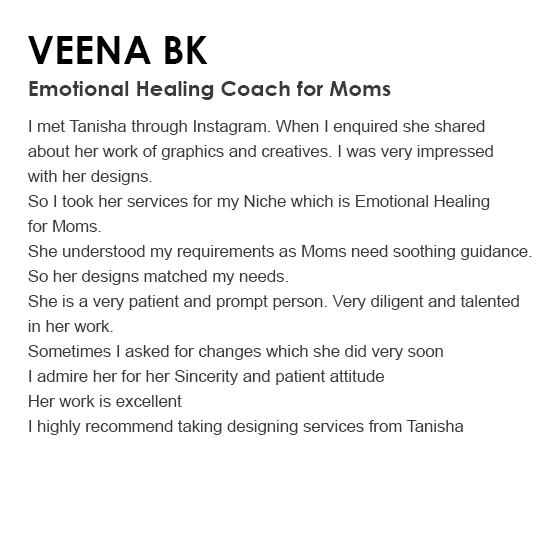
<style>
.page{position:relative;width:559px;height:559px;background:#ffffff}
.page>*{position:absolute;margin:0}
.t1{font:38.6px "CenturyGothic-Bold";color:#000000;text-transform:uppercase}
.t2{font:21.3px "CenturyGothic-Bold";color:#3a3a3a}
.t3{font:16.7px/25px "ArialMT";color:#3a3a3a}
</style>
<div class="page">
<p class="t1" style="left:28px;top:36px;width:180px;height:28px">Veena Bk</p>
<p class="t2" style="left:29px;top:81px;width:362px;height:19px">Emotional Healing Coach for Moms</p>
<p class="t3" style="left:27px;top:120px;width:505px;height:315px">I met Tanisha through Instagram. When I enquired she shared <br>about her work of graphics and creatives. I was very impressed <br>with her designs.<br>So I took her services for my Niche which is Emotional Healing <br>for Moms.<br>She understood my requirements as Moms need soothing guidance. <br>So her designs matched my needs.<br>She is a very patient and prompt person. Very diligent and talented <br>in her work.<br>Sometimes I asked for changes which she did very soon<br>I admire her for her Sincerity and patient attitude<br>Her work is excellent<br>I highly recommend taking designing services from Tanisha</p>
</div>
